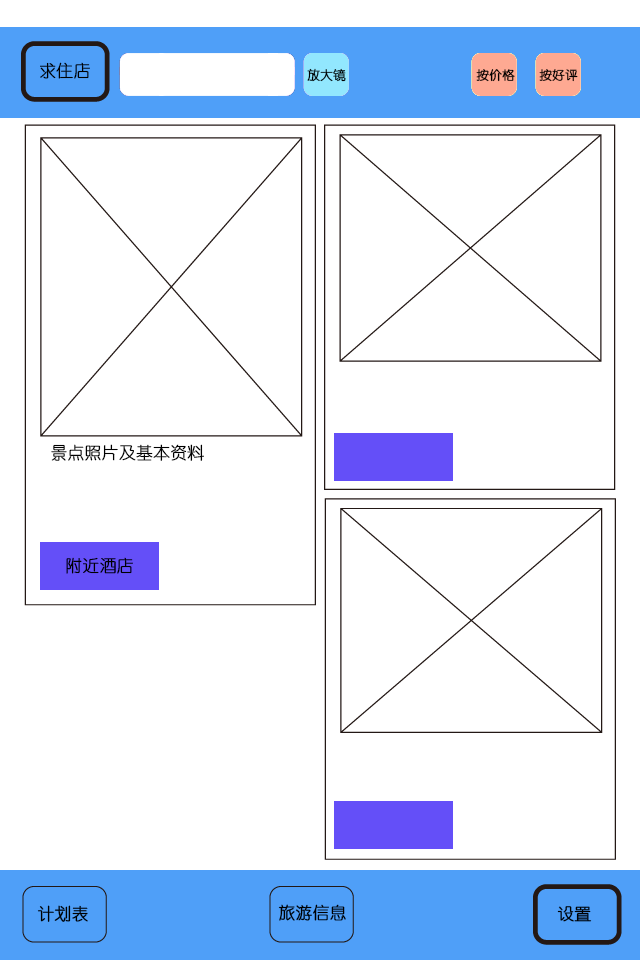
<style>
.page{position:relative;width:640px;height:960px;background:#ffffff}
.page>*{position:absolute;margin:0}
.t1{font:16.7px "YouYuan";color:#000000;font-weight:bold}
.t2{font:12.5px "YouYuan";color:#000000;font-weight:bold}
</style>
<div class="page">
<p class="t1" style="left:40px;top:62px;width:50px;height:17px">求住店</p>
<p class="t2" style="left:307px;top:68px;width:39px;height:14px">放大镜</p>
<p class="t2" style="left:476px;top:69px;width:39px;height:13px">按价格</p>
<p class="t2" style="left:539px;top:69px;width:39px;height:13px">按好评</p>
<p class="t1" style="left:51px;top:444px;width:153px;height:17px">景点照片及基本资料</p>
<p class="t1" style="left:66px;top:557px;width:67px;height:17px">附近酒店</p>
<p class="t1" style="left:37px;top:905px;width:51px;height:17px">计划表</p>
<p class="t1" style="left:278px;top:904px;width:68px;height:17px">旅游信息</p>
<p class="t1" style="left:557px;top:906px;width:35px;height:16px">设置</p>
</div>
